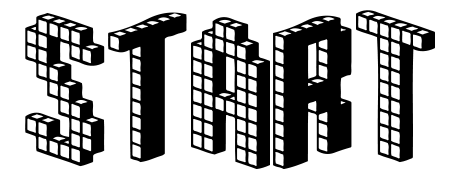
<style>
.page{position:relative;width:460px;height:180px;background:#ffffff}
.page>*{position:absolute;margin:0}
.t1{font:166.7px "Blox-(BRK";color:#000000}
</style>
<div class="page">
<p class="t1" style="left:25px;top:10px;width:410px;height:159px">StArT</p>
</div>
